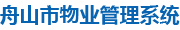
<style>
.page{position:relative;width:180px;height:30px;background:#ffffff}
.page>*{position:absolute;margin:0}
.t1{font:20px "MicrosoftYaHei-Bold";color:#0864b1}
</style>
<div class="page">
<p class="t1" style="left:0px;top:5px;width:180px;height:20px">舟山市物业管理系统</p>
</div>
